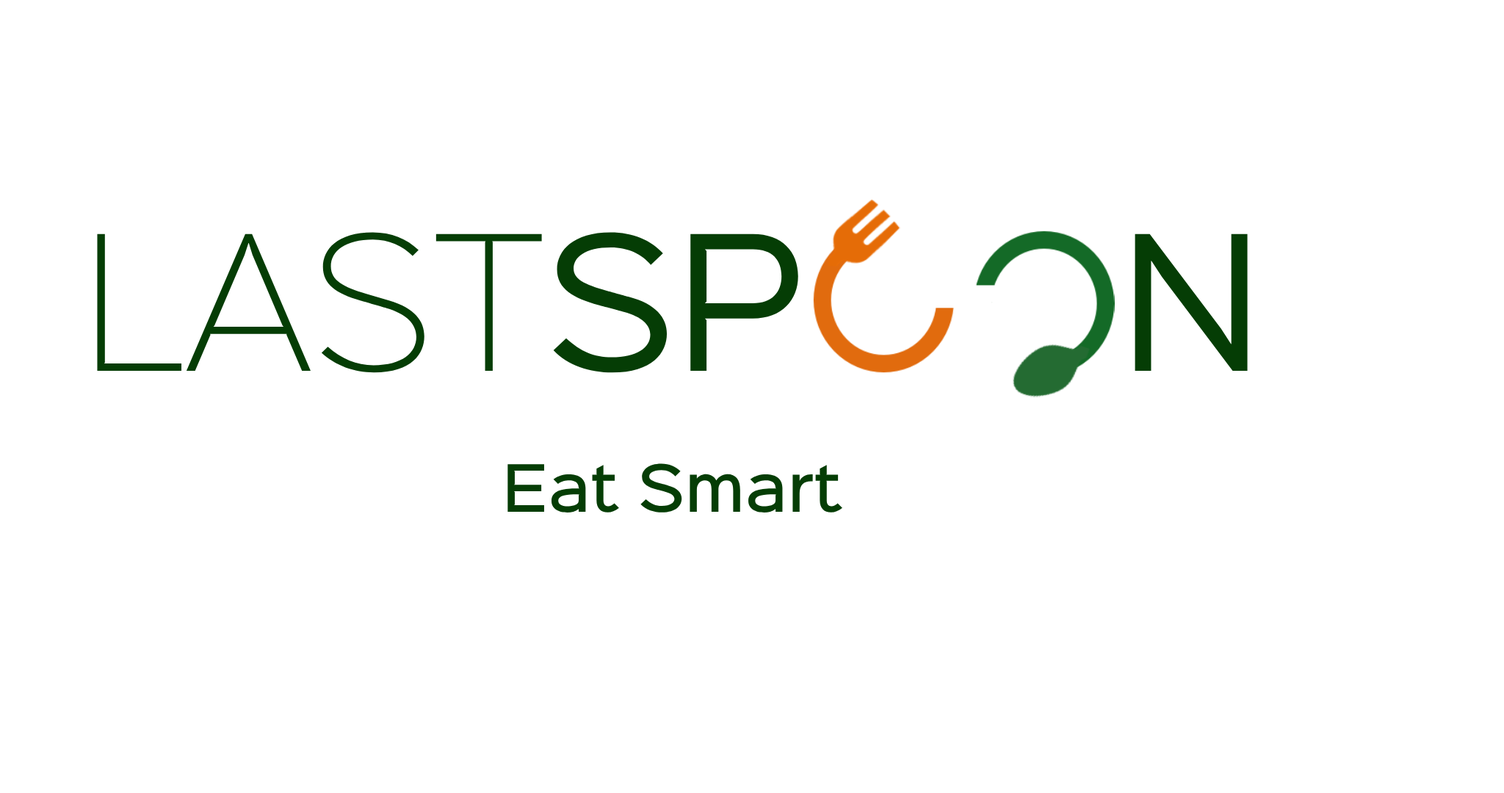
<style>
.page{position:relative;width:1504px;height:793px;background:#ffffff}
.page>*{position:absolute;margin:0}
.t1{font:168.9px "SinkinSans-400Regular";color:#053d05}
.t2{font:168.9px "SinkinSans-200XLight";color:#053d05}
.t3{font:58.7px "SinkinSans-500Medium";color:#053d05}
</style>
<div class="page">
<p class="t1" style="left:97px;top:232px;width:1150px;height:141px"><span class="t2">LAST</span>SP      N</p>
<p class="t3" style="left:507px;top:463px;width:335px;height:50px">Eat Smart</p>
</div>
